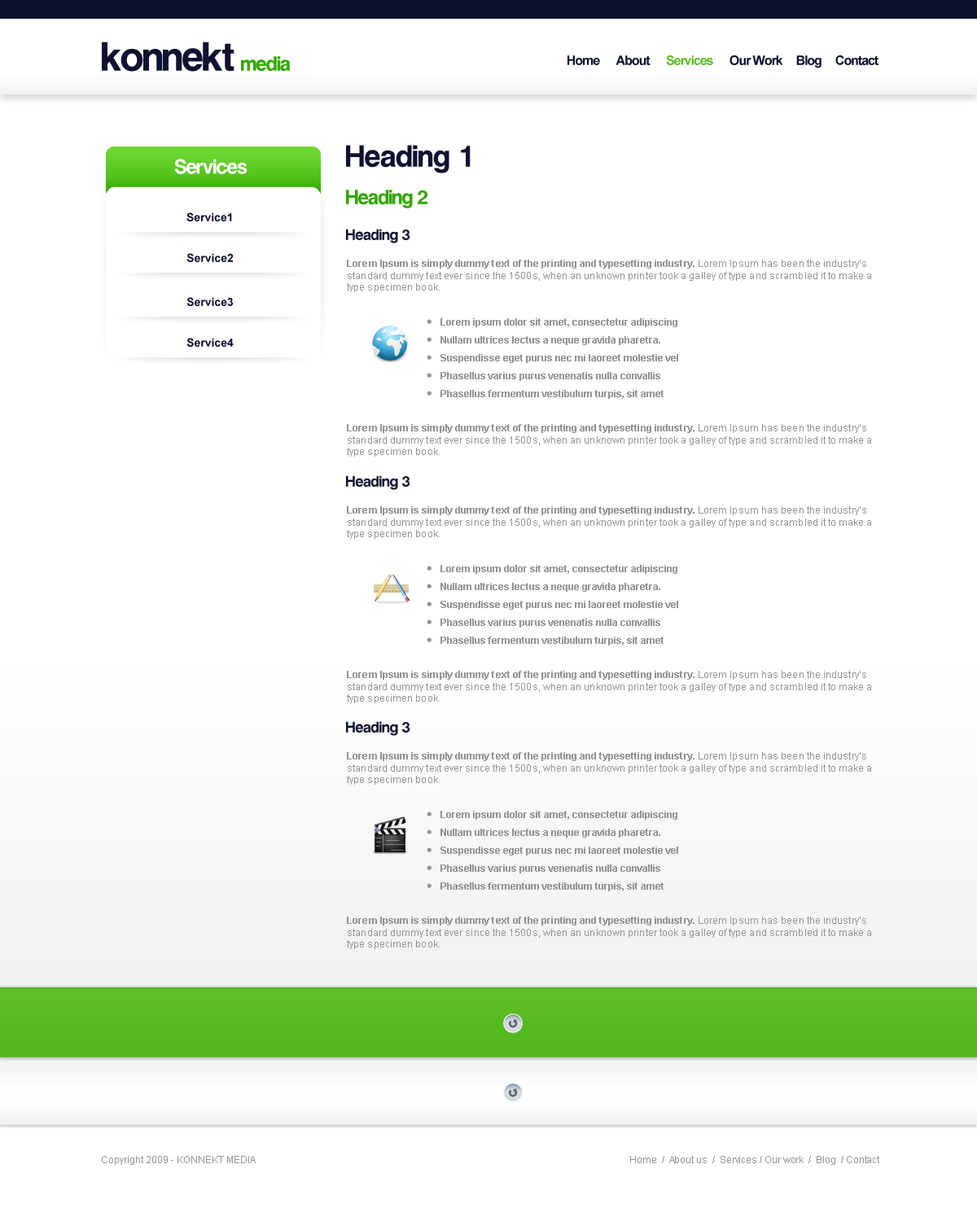
<style>
.page{position:relative;width:977px;height:1221px;background:#ffffff}
.page>*{position:absolute;margin:0}
.t1{font:39.1px "MgOpenModerna-Bold";letter-spacing:-0.06em;color:#0e1130}
.t2{font:19.5px "MgOpenModerna-Bold";letter-spacing:-0.06em;color:#32a700}
.t3{font:13px "Arial-BoldMT";letter-spacing:-0.065em;color:#0e1130}
.t4{font:13px "Arial-BoldMT";letter-spacing:-0.065em;color:#60be28}
.t5{font:29.3px "MgOpenModerna-Bold";letter-spacing:-0.04em;color:#0e1130}
.t6{font:19.5px "MgOpenModerna-Bold";letter-spacing:-0.06em;color:#ffffff}
.t7{font:11.4px "Arial-BoldMT";color:#0e1130}
.t8{font:14.7px "MgOpenModerna-Bold";letter-spacing:-0.04em;color:#0e1130}
.t9{font:9.8px "ArialMT";color:#949494}
.t10{font:9.8px "Arial-BoldMT";color:#949494}
.t11{font:9.8px/17.9px "Arial-BoldMT";color:#949494}
</style>
<div class="page">
<p class="t1" style="left:102px;top:42px;width:132px;height:30px">konnekt</p>
<p class="t2" style="left:241px;top:56px;width:50px;height:16px">media</p>
<p class="t3" style="left:567px;top:55px;width:311px;height:13px">Home      About      <span class="t4">Services </span>     Our Work     Blog     Contact</p>
<p class="t5" style="left:346px;top:145px;width:124px;height:28px">Heading 1</p>
<p class="t6" style="left:174px;top:159px;width:73px;height:15px">Services</p>
<p class="t2" style="left:346px;top:190px;width:81px;height:18px">Heading 2</p>
<p class="t7" style="left:186px;top:212px;width:46px;height:9px">Service1</p>
<p class="t8" style="left:346px;top:229px;width:64px;height:14px">Heading 3</p>
<p class="t7" style="left:186px;top:253px;width:47px;height:9px">Service2</p>
<p class="t9" style="left:347px;top:260px;width:524px;height:32px"><span class="t10">Lorem Ipsum is simply dummy text of the printing and typesetting industry.</span> Lorem Ipsum has been the industry’s standard dummy text ever since the 1500s, when an unknown printer took a galley of type and scrambled it to make a type specimen book.</p>
<p class="t7" style="left:186px;top:297px;width:47px;height:9px">Service3</p>
<p class="t11" style="left:440px;top:318px;width:238px;height:81px">Lorem ipsum dolor sit amet, consectetur adipiscing <br>Nullam ultrices lectus a neque gravida pharetra.<br>Suspendisse eget purus nec mi laoreet molestie vel <br>Phasellus varius purus venenatis nulla convallis <br>Phasellus fermentum vestibulum turpis, sit amet</p>
<p class="t7" style="left:186px;top:338px;width:48px;height:9px">Service4</p>
<p class="t9" style="left:347px;top:424px;width:524px;height:33px"><span class="t10">Lorem Ipsum is simply dummy text of the printing and typesetting industry.</span> Lorem Ipsum has been the industry’s standard dummy text ever since the 1500s, when an unknown printer took a galley of type and scrambled it to make a type specimen book.</p>
<p class="t8" style="left:346px;top:475px;width:64px;height:15px">Heading 3</p>
<p class="t9" style="left:347px;top:506px;width:524px;height:33px"><span class="t10">Lorem Ipsum is simply dummy text of the printing and typesetting industry.</span> Lorem Ipsum has been the industry’s standard dummy text ever since the 1500s, when an unknown printer took a galley of type and scrambled it to make a type specimen book.</p>
<p class="t11" style="left:440px;top:565px;width:238px;height:80px">Lorem ipsum dolor sit amet, consectetur adipiscing <br>Nullam ultrices lectus a neque gravida pharetra.<br>Suspendisse eget purus nec mi laoreet molestie vel <br>Phasellus varius purus venenatis nulla convallis <br>Phasellus fermentum vestibulum turpis, sit amet</p>
<p class="t9" style="left:347px;top:671px;width:524px;height:32px"><span class="t10">Lorem Ipsum is simply dummy text of the printing and typesetting industry.</span> Lorem Ipsum has been the industry’s standard dummy text ever since the 1500s, when an unknown printer took a galley of type and scrambled it to make a type specimen book.</p>
<p class="t8" style="left:346px;top:721px;width:64px;height:15px">Heading 3</p>
<p class="t9" style="left:347px;top:752px;width:524px;height:33px"><span class="t10">Lorem Ipsum is simply dummy text of the printing and typesetting industry.</span> Lorem Ipsum has been the industry’s standard dummy text ever since the 1500s, when an unknown printer took a galley of type and scrambled it to make a type specimen book.</p>
<p class="t11" style="left:440px;top:811px;width:238px;height:80px">Lorem ipsum dolor sit amet, consectetur adipiscing <br>Nullam ultrices lectus a neque gravida pharetra.<br>Suspendisse eget purus nec mi laoreet molestie vel <br>Phasellus varius purus venenatis nulla convallis <br>Phasellus fermentum vestibulum turpis, sit amet</p>
<p class="t9" style="left:347px;top:916px;width:524px;height:33px"><span class="t10">Lorem Ipsum is simply dummy text of the printing and typesetting industry.</span> Lorem Ipsum has been the industry’s standard dummy text ever since the 1500s, when an unknown printer took a galley of type and scrambled it to make a type specimen book.</p>
<p class="t9" style="left:102px;top:1156px;width:154px;height:9px">Copyright 2009 - KONNEKT MEDIA</p>
<p class="t9" style="left:630px;top:1156px;width:249px;height:9px">Home  /  About us  /  Services / Our work  /  Blog  / Contact</p>
</div>
